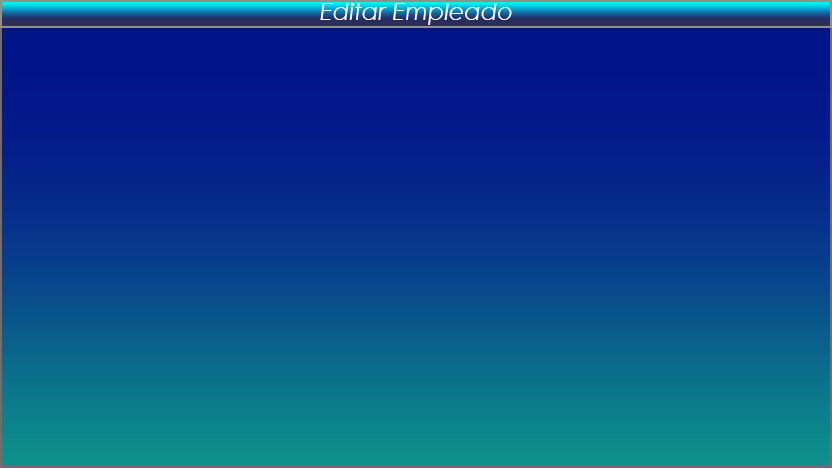
<style>
.page{position:relative;width:832px;height:469px}
.page>*{position:absolute;margin:0}
.t1{font:24px "CenturyGothic-Italic";color:#ffffff}
</style>
<div class="page">
<p class="t1" style="left:320px;top:3px;width:192px;height:22px">Editar Empleado</p>
</div>
